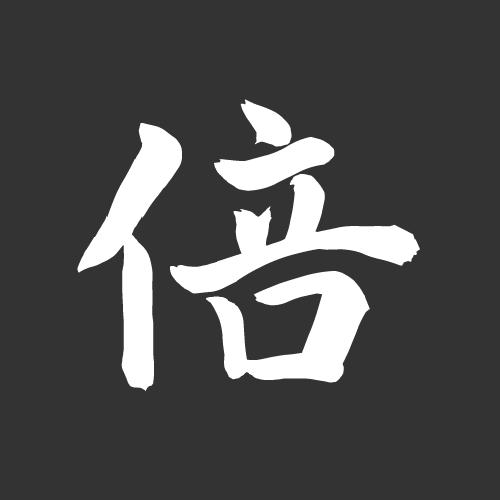
<style>
.page{position:relative;width:500px;height:500px;background:#333333}
.page>*{position:absolute;margin:0}
.t1{font:377.6px "nagayama_kai";color:#ffffff}
</style>
<div class="page">
<p class="t1" style="left:77px;top:99px;width:343px;height:293px">倍</p>
</div>
